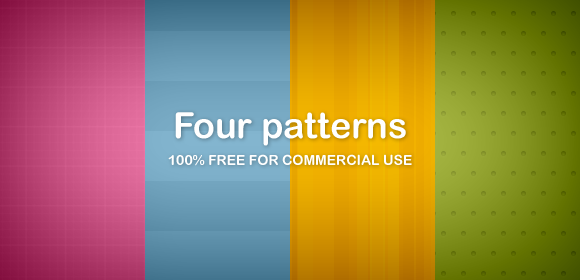
<style>
.page{position:relative;width:580px;height:280px}
.page>*{position:absolute;margin:0}
.t1{font:36px "ArialRoundedMTBold";color:#ffffff}
.t2{font:14px "ArialRoundedMTBold";color:#ffffff;text-transform:uppercase}
</style>
<div class="page">
<p class="t1" style="left:175px;top:112px;width:231px;height:34px">Four patterns</p>
<p class="t2" style="left:168px;top:154px;width:244px;height:12px">100% free for commercial use</p>
</div>
